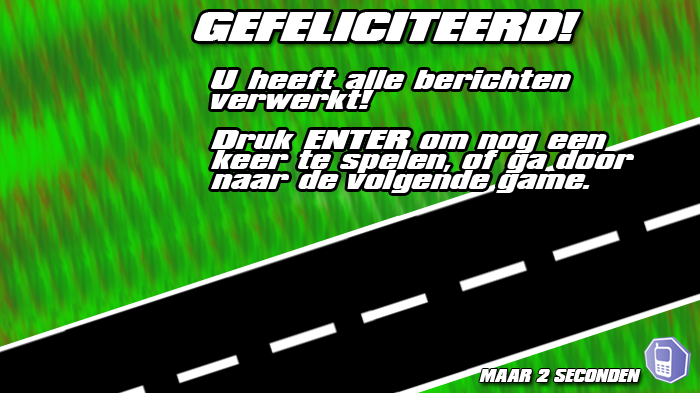
<style>
.page{position:relative;width:700px;height:393px;background:#000000}
.page>*{position:absolute;margin:0}
.t1{font:36px "LHFConvectaBASE";color:#ffffff}
.t2{font:24px/20px "LHFConvectaBASE";color:#ffffff}
.t3{font:16.3px "LHFConvectaBASE";color:#ffffff;scale:0.7 1}
</style>
<div class="page">
<p class="t1" style="left:194px;top:12px;width:387px;height:29px">GEFELICITEERD!</p>
<p class="t2" style="left:211px;top:70px;width:423px;height:123px">U heeft alle berichten<br>verwerkt!<br><br>Druk ENTER om nog een <br>keer te spelen, of ga door<br>naar de volgende game.</p>
<p class="t3" style="left:479px;top:369px;width:162px;height:13px">MAAR 2 SECONDEN</p>
</div>
